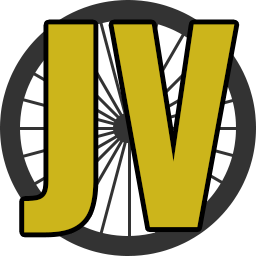
<style>
.page{position:relative;width:256px;height:256px;background:#ccb51b}
.page>*{position:absolute;margin:0}
.t1{font:250px "Oswald-Bold";color:#ccb51b;text-transform:uppercase}
</style>
<div class="page">
<p class="t1" style="left:24px;top:24px;width:211px;height:209px">JV</p>
</div>
